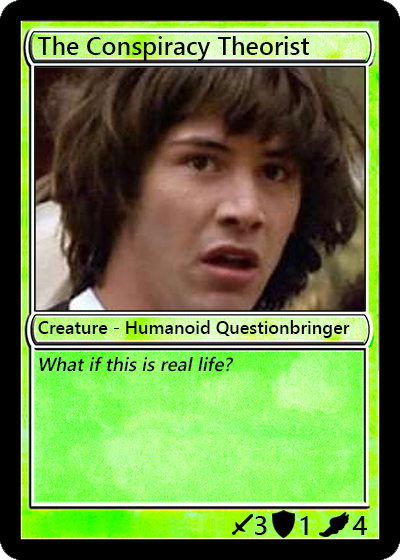
<style>
.page{position:relative;width:400px;height:560px}
.page>*{position:absolute;margin:0}
.t1{font:25px "YuGothicUI-Semibold";color:#000000}
.t2{font:18px "YuGothicUI-Semibold";color:#000000}
.t3{font:19px "YuGothicUI-Semibold";color:#000000;font-style:italic}
.t4{font:27px "YuGothicUI-Semibold";color:#000000}
</style>
<div class="page">
<p class="t1" style="left:37px;top:36px;width:272px;height:25px">The Conspiracy Theorist</p>
<p class="t2" style="left:38px;top:320px;width:312px;height:18px">Creature - Humanoid Questionbringer</p>
<p class="t3" style="left:39px;top:356px;width:195px;height:16px">What if this is real life?</p>
<p class="t4" style="left:255px;top:516px;width:12px;height:19px">3</p>
<p class="t4" style="left:300px;top:516px;width:8px;height:19px">1</p>
<p class="t4" style="left:352px;top:516px;width:15px;height:19px">4</p>
</div>
